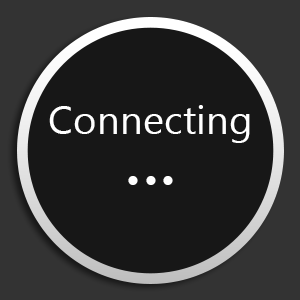
<style>
.page{position:relative;width:300px;height:300px;background:#171717}
.page>*{position:absolute;margin:0}
.t1{font:40.5px "SegoeUI";color:#ffffff}
.t2{font:82.5px "SegoeUI";color:#ffffff}
</style>
<div class="page">
<p class="t1" style="left:49px;top:105px;width:201px;height:38px">Connecting</p>
<p class="t2" style="left:128px;top:176px;width:45px;height:9px">...</p>
</div>
